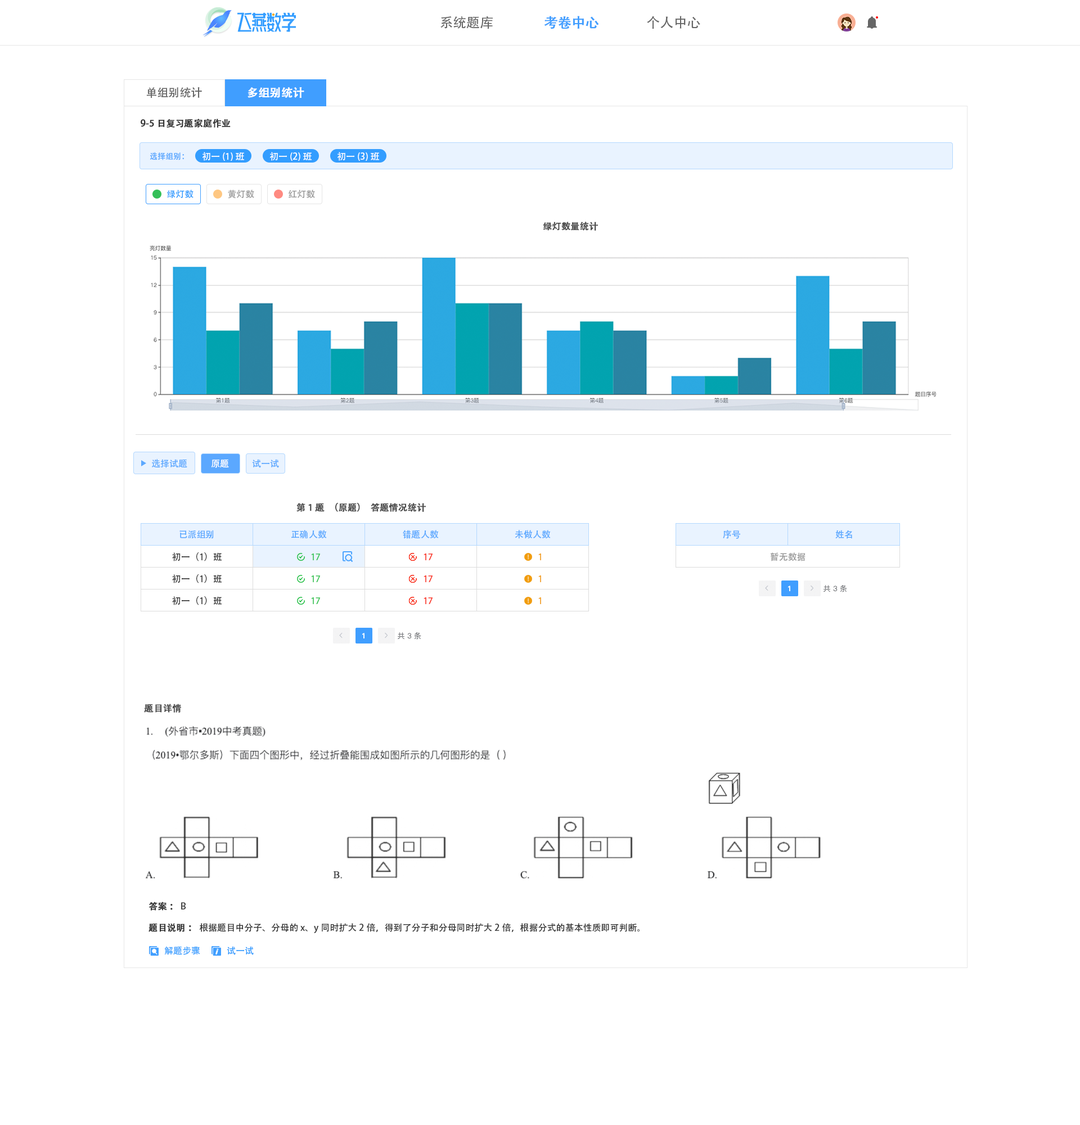
<style>
.page{position:relative;width:1080px;height:1125px;background:#ffffff}
.page>*{position:absolute;margin:0}
.t1{font:13.5px "AdobeHeitiStd-Regular";color:#666666}
.t2{font:13.5px "AdobeHeitiStd-Regular";color:#409eff;font-weight:bold}
.t3{font:11.2px "AdobeHeitiStd-Regular";color:#666666}
.t4{font:11.2px "AdobeHeitiStd-Regular";color:#ffffff;font-weight:bold}
.t5{font:9px "AdobeHeitiStd-Regular";color:#333333;font-weight:bold}
.t6{font:7.9px "AdobeHeitiStd-Regular";color:#5ba8ff}
.t7{font:9px "AdobeHeitiStd-Regular";color:#ffffff}
.t8{font:9px "AdobeHeitiStd-Regular";color:#339dff}
.t9{font:9px "AdobeHeitiStd-Regular";color:#999999}
.t10{font:9px "AdobeHeitiStd-Regular";color:#5ba8ff}
.t11{font:9px "AdobeHeitiStd-Regular";color:#333333}
.t12{font:9px "AdobeHeitiStd-Regular";color:#34c353}
.t13{font:9px "AdobeHeitiStd-Regular";color:#f9301f}
.t14{font:9px "AdobeHeitiStd-Regular";color:#f19c0e}
</style>
<div class="page">
<p class="t1" style="left:440px;top:16px;width:53px;height:13px">系统题库</p>
<p class="t2" style="left:544px;top:16px;width:55px;height:13px">考卷中心</p>
<p class="t1" style="left:647px;top:16px;width:53px;height:13px">个人中心</p>
<p class="t3" style="left:146px;top:87px;width:56px;height:11px">单组别统计</p>
<p class="t4" style="left:248px;top:87px;width:56px;height:11px">多组别统计</p>
<p class="t5" style="left:141px;top:119px;width:90px;height:9px">9-5日复习题家庭作业</p>
<p class="t6" style="left:150px;top:152px;width:34px;height:8px">选择组别：</p>
<p class="t7" style="left:202px;top:152px;width:42px;height:9px">初一(1)班</p>
<p class="t7" style="left:270px;top:152px;width:42px;height:9px">初一(2)班</p>
<p class="t7" style="left:338px;top:152px;width:41px;height:9px">初一(3)班</p>
<p class="t8" style="left:167px;top:190px;width:27px;height:9px">绿灯数</p>
<p class="t9" style="left:228px;top:190px;width:26px;height:9px">黄灯数</p>
<p class="t9" style="left:289px;top:190px;width:26px;height:9px">红灯数</p>
<p class="t5" style="left:543px;top:222px;width:55px;height:9px;opacity:0.93">绿灯数量统计</p>
<p class="t10" style="left:152px;top:459px;width:35px;height:9px">选择试题</p>
<p class="t7" style="left:211px;top:459px;width:18px;height:9px">原题</p>
<p class="t10" style="left:252px;top:459px;width:27px;height:9px">试一试</p>
<p class="t5" style="left:296px;top:503px;width:130px;height:9px;opacity:0.93">第1题（原题）答题情况统计</p>
<p class="t10" style="left:179px;top:530px;width:35px;height:9px">已派组别</p>
<p class="t10" style="left:291px;top:530px;width:36px;height:9px">正确人数</p>
<p class="t10" style="left:403px;top:530px;width:36px;height:9px">错题人数</p>
<p class="t10" style="left:515px;top:530px;width:36px;height:9px">未做人数</p>
<p class="t10" style="left:723px;top:530px;width:17px;height:9px">序号</p>
<p class="t10" style="left:835px;top:530px;width:17px;height:9px">姓名</p>
<p class="t11" style="left:172px;top:552px;width:50px;height:9px">初一（1）班</p>
<p class="t12" style="left:311px;top:554px;width:9px;height:6px">17</p>
<p class="t13" style="left:424px;top:554px;width:9px;height:6px">17</p>
<p class="t14" style="left:538px;top:554px;width:3px;height:6px">1</p>
<p class="t9" style="left:771px;top:552px;width:35px;height:9px">暂无数据</p>
<p class="t11" style="left:172px;top:574px;width:50px;height:9px">初一（1）班</p>
<p class="t12" style="left:311px;top:575px;width:9px;height:7px">17</p>
<p class="t13" style="left:424px;top:575px;width:9px;height:7px">17</p>
<p class="t14" style="left:538px;top:575px;width:3px;height:7px">1</p>
<p class="t11" style="left:172px;top:596px;width:50px;height:9px">初一（1）班</p>
<p class="t12" style="left:311px;top:597px;width:9px;height:7px">17</p>
<p class="t13" style="left:424px;top:597px;width:9px;height:7px">17</p>
<p class="t14" style="left:538px;top:597px;width:3px;height:7px">1</p>
<p class="t5" style="left:144px;top:704px;width:37px;height:9px;opacity:0.93">题目详情</p>
<p class="t5" style="left:148px;top:902px;width:38px;height:9px">答案： <span class="t11">B</span></p>
<p class="t11" style="left:148px;top:923px;width:492px;height:10px"><span class="t5">题目说明： </span>根据题目中分子、分母的x、y同时扩大2倍，得到了分子和分母同时扩大2倍，根据分式的基本性质即可判断。</p>
<p class="t8" style="left:164px;top:946px;width:36px;height:9px">解题步骤</p>
<p class="t8" style="left:227px;top:946px;width:27px;height:9px">试一试</p>
</div>
